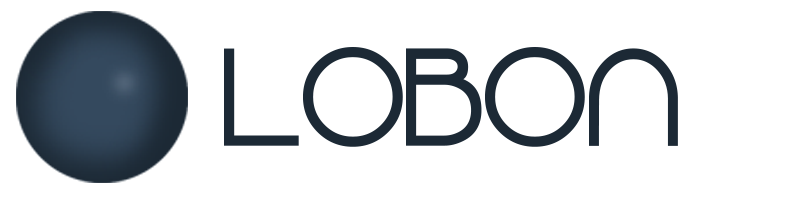
<style>
.page{position:relative;width:800px;height:202px;background:#ffffff}
.page>*{position:absolute;margin:0}
.t1{font:133.6px "Vonique64-Bold";color:#1c2935}
</style>
<div class="page">
<p class="t1" style="left:224px;top:47px;width:454px;height:100px">Lobon</p>
</div>
